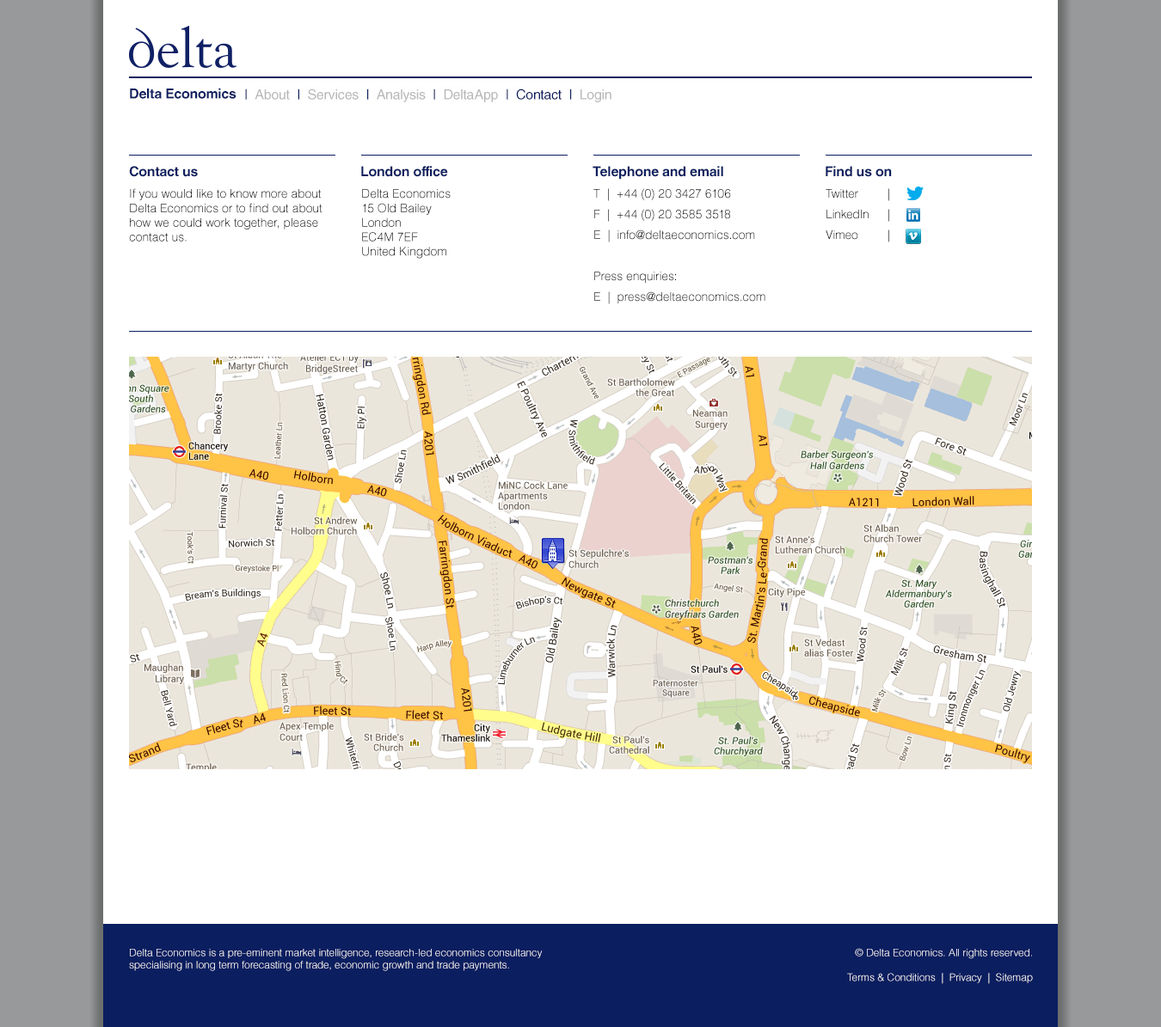
<style>
.page{position:relative;width:1161px;height:1027px;background:#ffffff}
.page>*{position:absolute;margin:0}
.t1{font:13.8px "HelveticaLTStd-Bold";letter-spacing:-0.015em;color:#0b1e60}
.t2{font:13.8px "HelveticaLTStd-Roman";letter-spacing:-0.015em;color:#0b1e60}
.t3{font:13.8px "HelveticaLTStd-Roman";letter-spacing:-0.015em;color:#b7b7b7}
.t4{font:12px "HelveticaLTStd-Light";color:#000000}
.t5{font:12px/20.6px "HelveticaLTStd-Light";color:#000000}
.t6{font:12px/20.6px "HelveticaLTStd-Light";letter-spacing:-0.015em;color:#000000}
.t7{font:10.3px "HelveticaLTStd-Light";color:#ffffff}
</style>
<div class="page">
<p class="t1" style="left:130px;top:88px;width:106px;height:11px">Delta Economics</p>
<p class="t2" style="left:245px;top:89px;width:366px;height:13px">|  <span class="t3">About  </span>|  <span class="t3">Services  </span>|  <span class="t3">Analysis  </span>|  <span class="t3">DeltaApp  </span>|  Contact  |  <span class="t3">Login</span></p>
<p class="t1" style="left:129px;top:166px;width:69px;height:11px">Contact us</p>
<p class="t1" style="left:361px;top:166px;width:87px;height:11px">London office</p>
<p class="t1" style="left:592px;top:166px;width:131px;height:14px">Telephone and email</p>
<p class="t1" style="left:825px;top:166px;width:67px;height:11px">Find us on</p>
<p class="t4" style="left:129px;top:188px;width:193px;height:54px">If you would like to know more about Delta Economics or to find out about how we could work together, please contact us.</p>
<p class="t4" style="left:362px;top:189px;width:89px;height:70px">Delta Economics<br>15 Old Bailey<br>London<br>EC4M 7EF<br>United Kingdom</p>
<p class="t5" style="left:593px;top:188px;width:172px;height:116px">T  |  +44 (0) 20 3427 6106<br>F  |  +44 (0) 20 3585 3518<br>E  |  info@deltaeconomics.com<br><br>Press enquiries:<br>E  |  press@deltaeconomics.com</p>
<p class="t6" style="left:825px;top:188px;width:64px;height:54px">Twitter | <br>LinkedIn | <br>Vimeo |</p>
<p class="t7" style="left:129px;top:949px;width:413px;height:23px">Delta Economics is a pre-eminent market intelligence, research-led economics consultancy<br>specialising in long term forecasting of trade, economic growth and trade payments.</p>
<p class="t7" style="left:847px;top:948px;width:186px;height:36px;text-align:right">© Delta Economics. All rights reserved.<br><br>Terms &amp; Conditions  |  Privacy  |  Sitemap</p>
</div>
